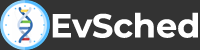
<style>
.page{position:relative;width:200px;height:50px;background:#333333}
.page>*{position:absolute;margin:0}
.t1{font:33.3px "Montserrat-Bold";color:#ffffff}
</style>
<div class="page">
<p class="t1" style="left:52px;top:12px;width:146px;height:26px">EvSched</p>
</div>
